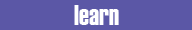
<style>
.page{position:relative;width:192px;height:30px;background:#5b57a6}
.page>*{position:absolute;margin:0}
.t1{font:28px "Haettenschweiler";color:#ffffff}
</style>
<div class="page">
<p class="t1" style="left:74px;top:5px;width:45px;height:20px">learn</p>
</div>
